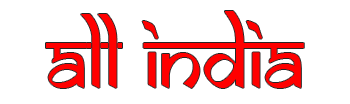
<style>
.page{position:relative;width:350px;height:104px;background:#ffffff}
.page>*{position:absolute;margin:0}
.t1{font:83.4px "SamarkanNormal";color:#ff0000}
</style>
<div class="page">
<p class="t1" style="left:46px;top:11px;width:258px;height:77px">All India</p>
</div>
